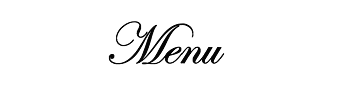
<style>
.page{position:relative;width:337px;height:98px;background:#ffffff}
.page>*{position:absolute;margin:0}
.t1{font:59.3px "EdwardianScriptITC";color:#060606}
</style>
<div class="page">
<p class="t1" style="left:108px;top:21px;width:117px;height:44px">Menu</p>
</div>
